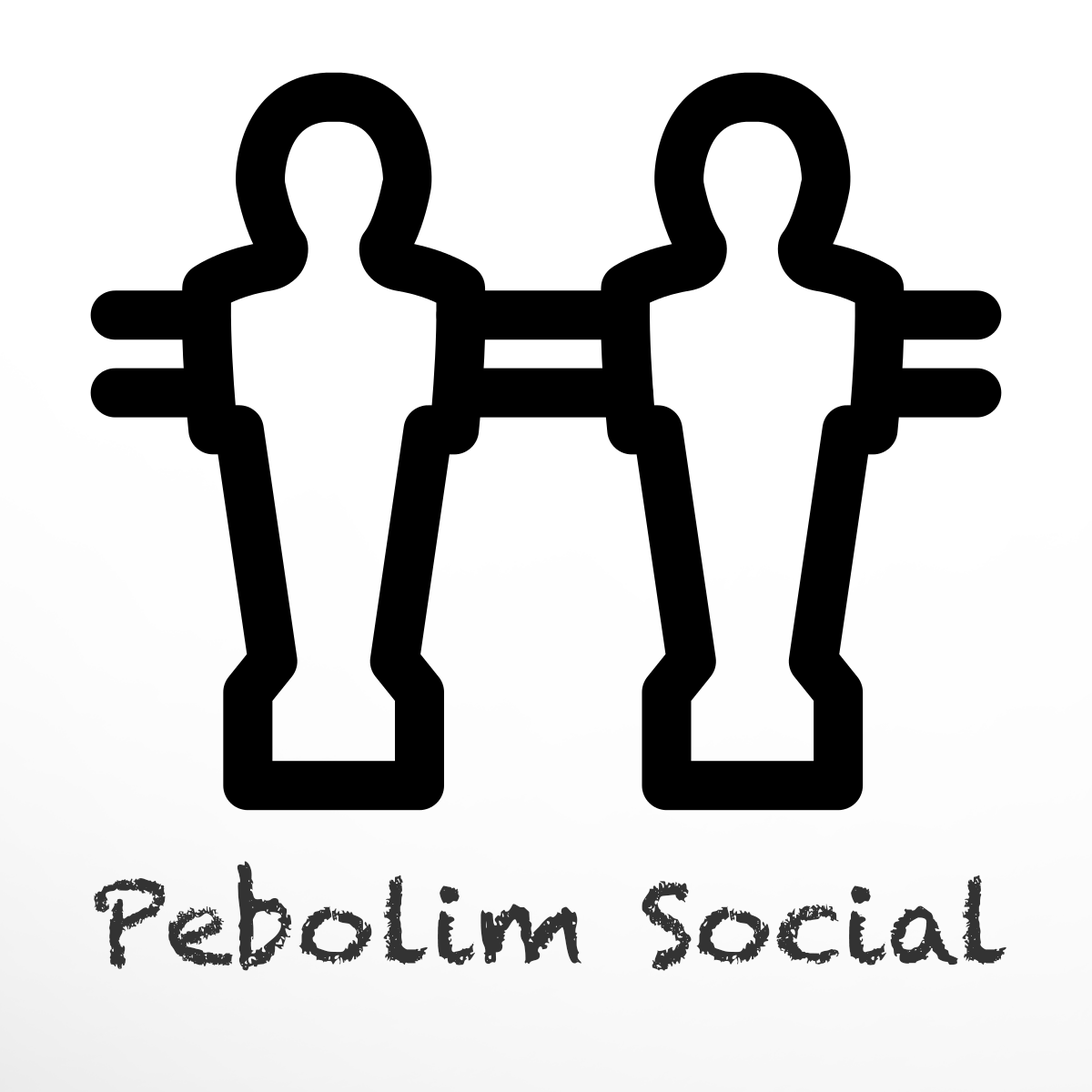
<style>
.page{position:relative;width:1092px;height:1092px;background:#ffffff}
.page>*{position:absolute;margin:0}
.t1{font:109.2px "Chalkduster";color:#333333}
</style>
<div class="page">
<p class="t1" style="left:94px;top:861px;width:912px;height:110px">Pebolim Social</p>
</div>
